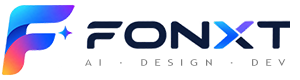
<style>
.page{position:relative;width:300px;height:80px;background:#ffffff}
.page>*{position:absolute;margin:0}
.t1{font:8.9px "TrebuchetMS";letter-spacing:0.56em;color:#808080;scale:1.35 1}
</style>
<div class="page">
<p class="t1" style="left:85px;top:59px;width:201px;height:7px">AI · DESIGN · DEV</p>
</div>
